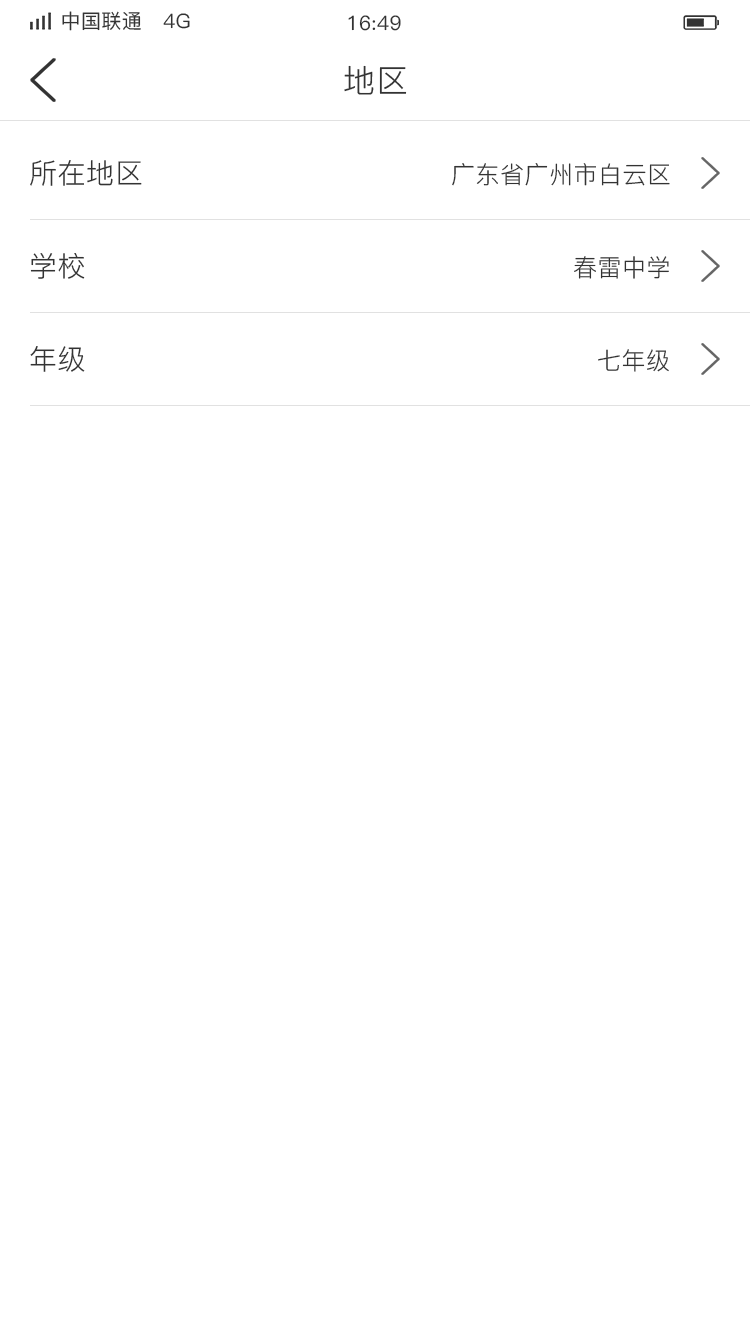
<style>
.page{position:relative;width:750px;height:1334px;background:#ffffff}
.page>*{position:absolute;margin:0}
.t1{font:20px "PingFang-SC-Medium";letter-spacing:0.02em;color:#333333}
.t2{font:32px "PingFang-SC-Regular";letter-spacing:0.02em;color:#333333}
.t3{font:28px "PingFang-SC-Regular";letter-spacing:0.02em;color:#333333}
.t4{font:24px "PingFang-SC-Regular";letter-spacing:0.02em;color:#333333}
</style>
<div class="page">
<p class="t1" style="left:62px;top:11px;width:128px;height:20px">中国联通   4G</p>
<p class="t1" style="left:348px;top:15px;width:53px;height:16px">16:49</p>
<p class="t2" style="left:344px;top:65px;width:63px;height:30px">地区</p>
<p class="t3" style="left:30px;top:160px;width:112px;height:26px">所在地区</p>
<p class="t4" style="left:452px;top:163px;width:218px;height:23px">广东省广州市白云区</p>
<p class="t3" style="left:30px;top:253px;width:55px;height:26px">学校</p>
<p class="t4" style="left:574px;top:256px;width:95px;height:23px">春雷中学</p>
<p class="t3" style="left:30px;top:346px;width:55px;height:26px">年级</p>
<p class="t4" style="left:598px;top:349px;width:71px;height:23px">七年级</p>
</div>
